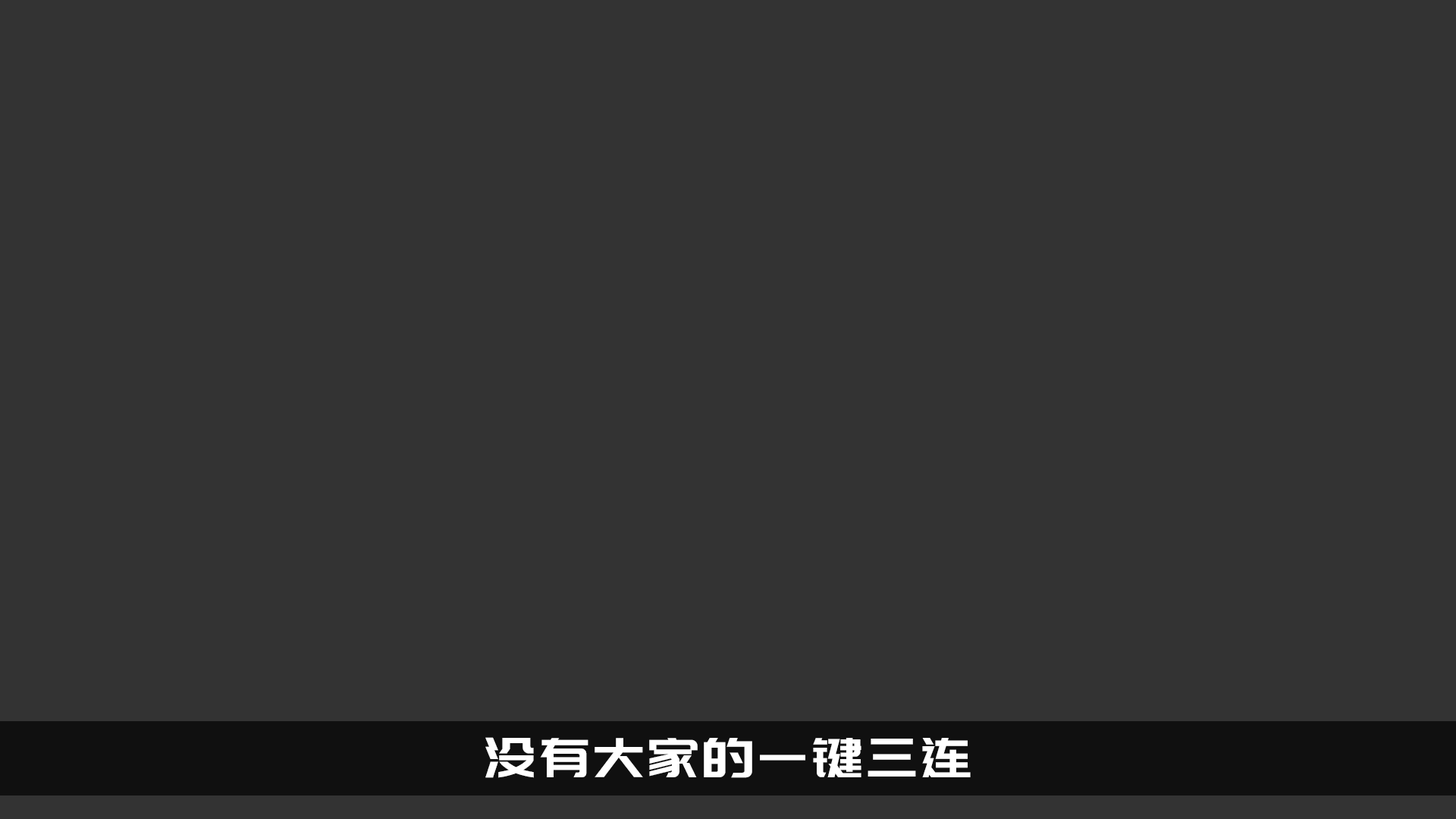
<style>
.page{position:relative;width:1456px;height:819px;background:#333333}
.page>*{position:absolute;margin:0}
.t1{font:54.6px "PangMenZhengDao-3";color:#ffffff}
</style>
<div class="page">
<p class="t1" style="left:485px;top:737px;width:486px;height:41px">没有大家的一键三连</p>
</div>
